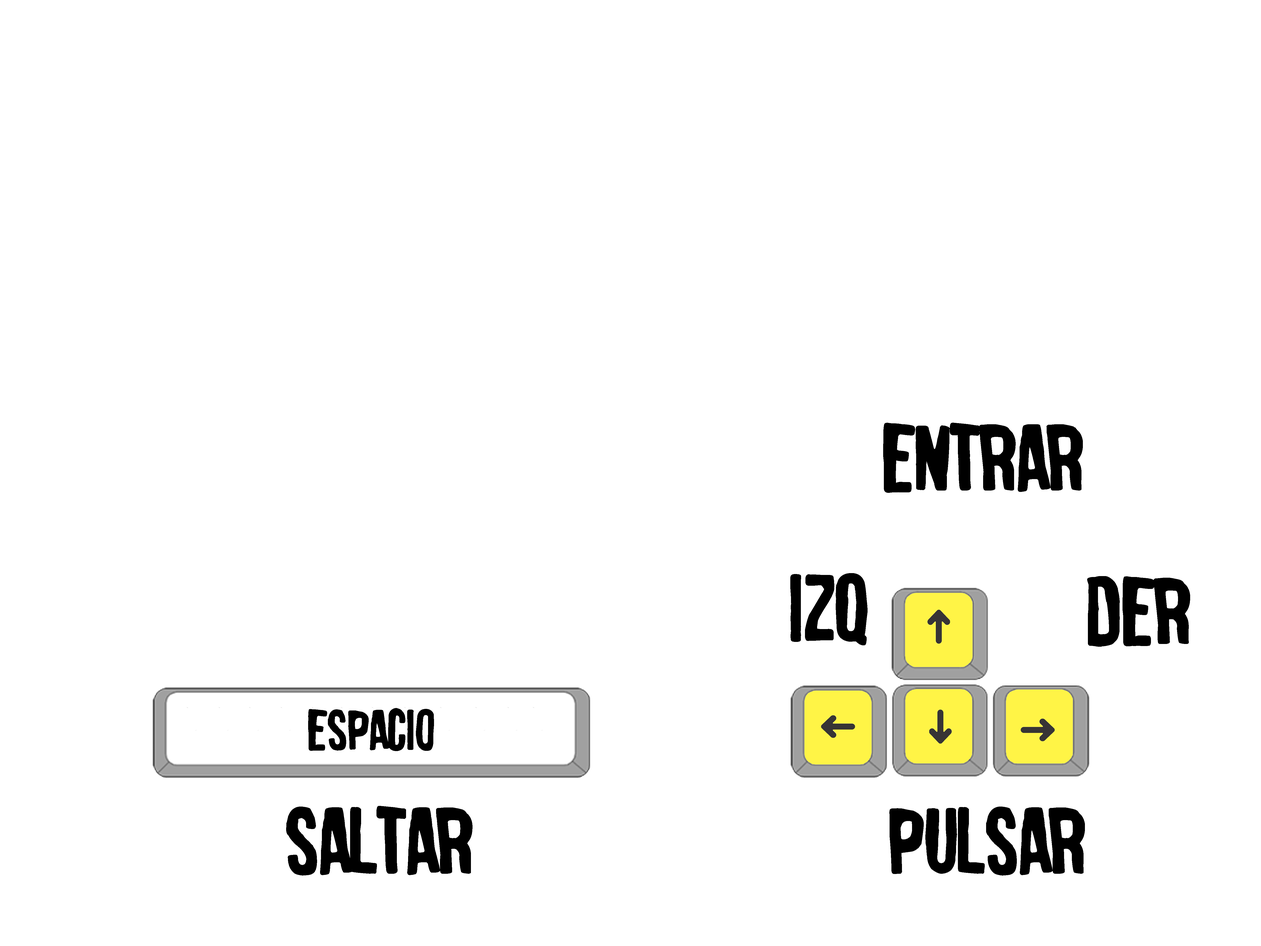
<style>
.page{position:relative;width:1261px;height:946px;background:#ffffff}
.page>*{position:absolute;margin:0}
.t1{font:92.6px "camellodespit";color:#000000}
.t2{font:55.5px "camellodespit";color:#000000}
</style>
<div class="page">
<p class="t1" style="left:883px;top:423px;width:200px;height:70px">ENTRAR</p>
<p class="t1" style="left:790px;top:573px;width:78px;height:72px">IZQ</p>
<p class="t1" style="left:1087px;top:576px;width:103px;height:71px">DER</p>
<p class="t2" style="left:308px;top:708px;width:126px;height:43px">espacio</p>
<p class="t1" style="left:286px;top:806px;width:186px;height:69px">saltar</p>
<p class="t1" style="left:889px;top:806px;width:196px;height:69px">PULSAR</p>
</div>
